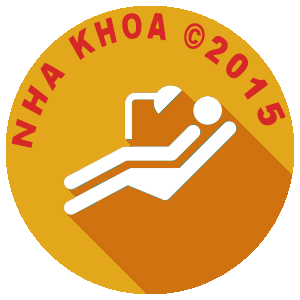
<style>
.page{position:relative;width:300px;height:300px;background:#e2a71a}
.page>*{position:absolute;margin:0}
.t1{font:24.4px "Arial-Black";letter-spacing:0.215em;color:#d72727;scale:0.74 1}
</style>
<div class="page">
<p class="t1" style="left:11px;top:13px;width:275px;height:135px;rotate:-4deg">NHA KHOA ©2015</p>
</div>
